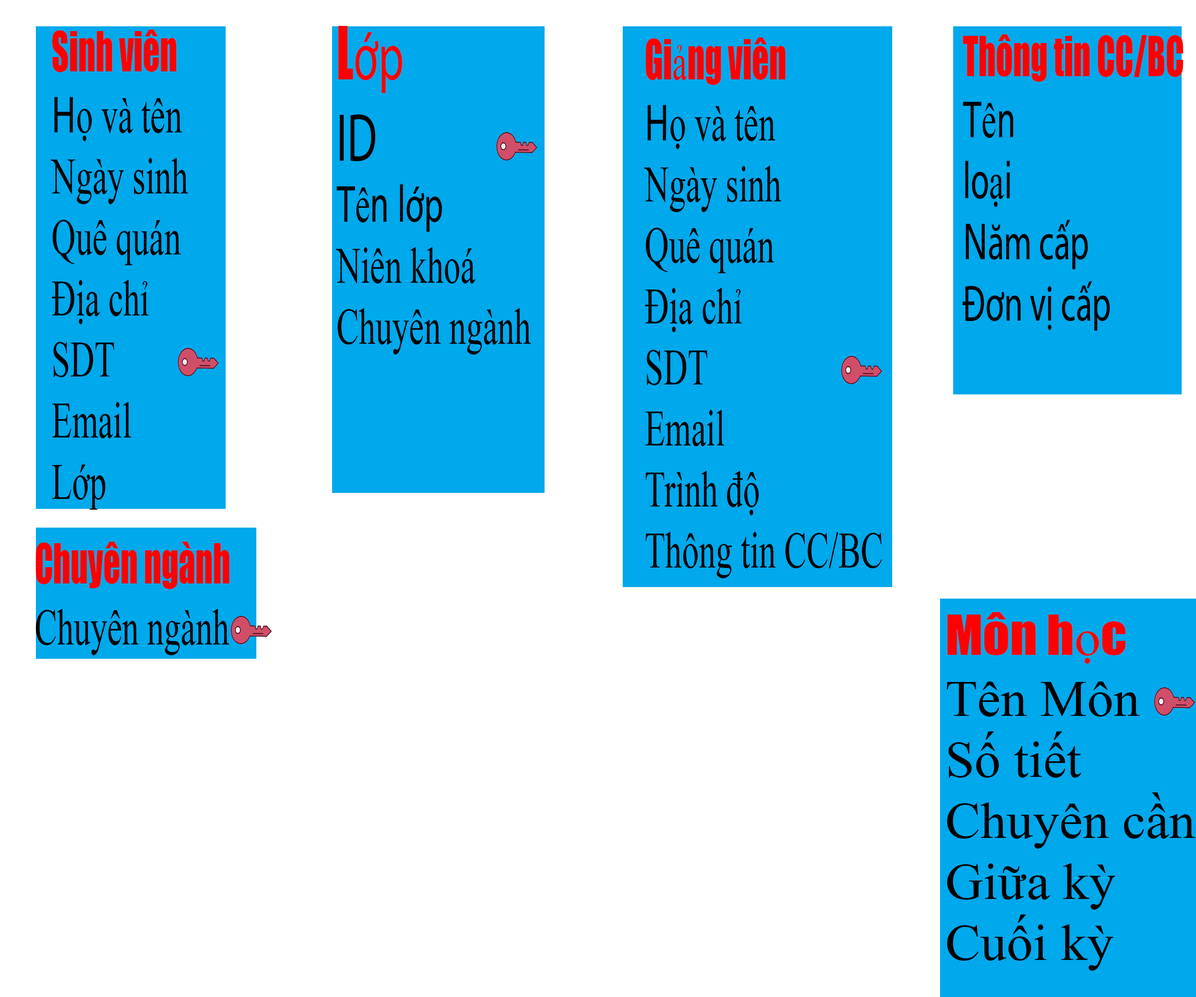
<style>
.page{position:relative;width:1196px;height:997px;background:#ffffff}
.page>*{position:absolute;margin:0}
.t1{font:50.9px "TimesNewRomanPSMT";color:#000000;scale:0.66 1}
.t2{font:50.9px "Impact";color:#ff0000;scale:0.66 1}
.t3{font:50.9px "AcuminConcept-Regular";color:#000000;scale:0.66 1}
.t4{font:67.8px "Impact";color:#ff0000;scale:0.66 1}
.t5{font:67.8px "MyriadPro-Regular";color:#ff0000;scale:0.66 1}
.t6{font:67.8px "MyriadPro-Regular";color:#000000;scale:0.66 1}
.t7{font:50.9px "MyriadPro-Regular";color:#000000;scale:0.66 1}
.t8{font:50.9px "TimesNewRomanPSMT";color:#ff0000;scale:0.66 1}
.t9{font:50.9px "TimesNewRomanPSMT";color:#000000;scale:1.04 1}
.t10{font:50.9px "Impact";color:#ff0000;scale:1.04 1}
.t11{font:50.9px "TimesNewRomanPSMT";color:#ff0000;scale:1.04 1}
</style>
<div class="page">
<p class="t1" style="left:51px;top:30px;width:137px;height:480px"><span class="t2">Sinh viên<br></span><span class="t3">H</span>ọ và tên<br>Ngày sinh<br>Quê quán<br>Địa chỉ<br>SDT<br>Email<br>Lớp</p>
<p class="t1" style="left:336px;top:26px;width:195px;height:328px"><span class="t4">L</span><span class="t5">ớp <br></span><span class="t6">ID<br></span><span class="t3">T</span>ê<span class="t3">n l</span><span class="t7">ớp<br></span>Niên khoá<br>Chuyên ngành</p>
<p class="t1" style="left:644px;top:37px;width:238px;height:541px"><span class="t2">Gi</span><span class="t8">ả</span><span class="t2">ng viên<br></span><span class="t3">H</span>ọ và tên<br>Ngày sinh<br>Quê quán<br>Địa chỉ<br>SDT<br>Email<br>Trình độ<br>Thông tin CC/BC</p>
<p class="t7" style="left:963px;top:34px;width:220px;height:297px"><span class="t2">Thông tin CC/BC<br></span><span class="t3">T</span><span class="t1">ê</span><span class="t3">n<br>lo</span><span class="t1">ạ</span><span class="t3">i<br>N</span>ăm cấp<br>Đơn vị cấp</p>
<p class="t2" style="left:35px;top:541px;width:195px;height:114px">Chuyên ngành <span class="t1"><br>Chuyên ngành</span></p>
<p class="t9" style="left:947px;top:612px;width:248px;height:359px"><span class="t10">Môn h</span><span class="t11">ọ</span><span class="t10">c<br></span>Tên Môn<br>Số tiết<br>Chuyên cần<br>Giữa kỳ<br>Cuối kỳ</p>
</div>
